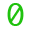
<style>
.page{position:relative;width:30px;height:30px;background:#ffffff}
.page>*{position:absolute;margin:0}
.t1{font:30px "Monaco";color:#20c20e}
</style>
<div class="page">
<p class="t1" style="left:7px;top:3px;width:17px;height:23px">0</p>
</div>
